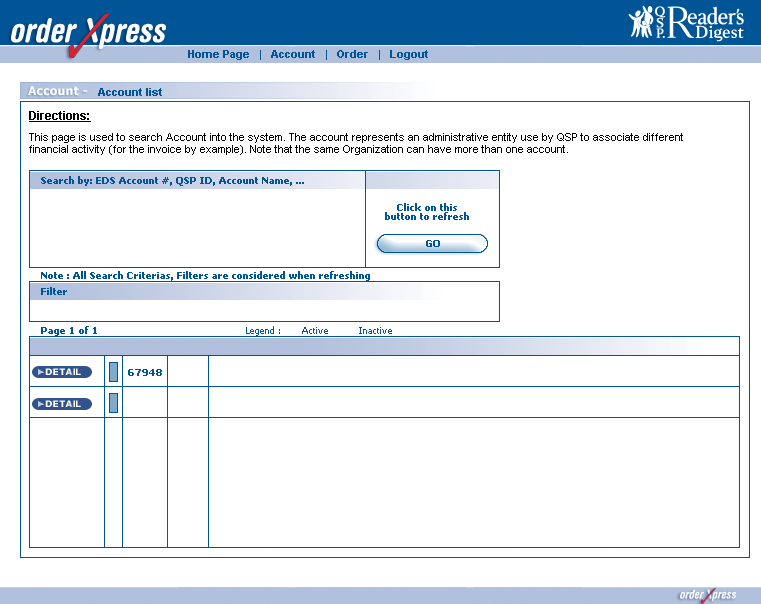
<style>
.page{position:relative;width:761px;height:604px;background:#ffffff}
.page>*{position:absolute;margin:0}
.t1{font:11px "Arial-BoldMT";color:#005596}
.t2{font:12px "Tahoma-Bold";letter-spacing:0.025em;color:#ffffff}
.t3{font:11px/12px "ArialMT";color:#000000}
.t4{font:12px/9px "Arial-BoldMT";color:#000000;text-decoration:underline}
.t5{font:10px "Tahoma-Bold";color:#005596}
.t6{font:10px/9px "Tahoma-Bold";color:#005596}
.t7{font:9px "Tahoma";color:#005596}
</style>
<div class="page">
<p class="t1" style="left:188px;top:50px;width:240px;height:10px">Home Page   |   Account   |   Order   |   Logout</p>
<p class="t2" style="left:28px;top:86px;width:60px;height:10px">Account -</p>
<p class="t1" style="left:98px;top:88px;width:64px;height:8px">Account list</p>
<p class="t3" style="left:29px;top:111px;width:654px;height:44px"><span class="t4">Directions:<br><br></span>This page is used to search Account into the system. The account represents an administrative entity use by QSP to associate different<br>financial activity (for the invoice by example). Note that the same Organization can have more than one account.</p>
<p class="t5" style="left:41px;top:176px;width:263px;height:10px">Search by: EDS Account #, QSP ID, Account Name, ...</p>
<p class="t6" style="left:385px;top:203px;width:84px;height:17px;text-align:center">Click on this<br>button to refresh</p>
<p class="t5" style="left:426px;top:240px;width:14px;height:7px">GO</p>
<p class="t5" style="left:41px;top:271px;width:329px;height:10px">Note : All Search Criterias, Filters are considered when refreshing</p>
<p class="t5" style="left:41px;top:287px;width:26px;height:8px">Filter</p>
<p class="t7" style="left:41px;top:326px;width:351px;height:10px"><span class="t5">Page 1 of 1                                                </span> Legend :       Active          Inactive</p>
<p class="t5" style="left:128px;top:369px;width:34px;height:7px">67948</p>
</div>
